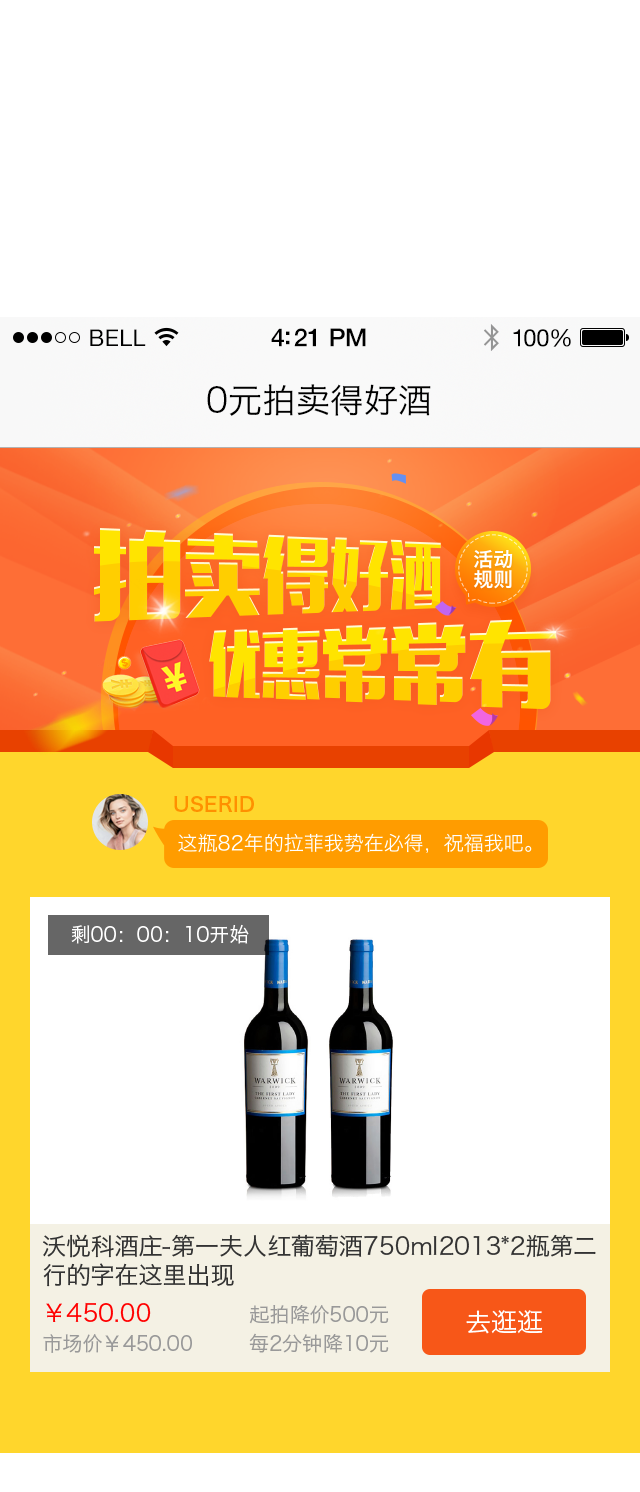
<style>
.page{position:relative;width:640px;height:1492px;background:#ffffff}
.page>*{position:absolute;margin:0}
.t1{font:23px "HelveticaNeue";letter-spacing:0.02em;color:#000000}
.t2{font:25px "HelveticaNeue-Medium";letter-spacing:-0.02em;color:#000000}
.t3{font:24px "HelveticaNeue";letter-spacing:-0.02em;color:#010101}
.t4{font:34px "HiraginoSansGB-W3";color:#000000}
.t5{font:20px "HiraginoSansGB-W6";color:#ff9000}
.t6{font:20px "HiraginoSansGB-W3";color:#ffffff}
.t7{font:24px "HiraginoSansGB-W3";color:#333333}
.t8{font:24px "HiraginoSansGB-W3";color:#ff0000}
.t9{font:20px "HiraginoSansGB-W3";color:#999999}
.t10{font:20px "HiraginoSansGB-W3"}
</style>
<div class="page">
<p class="t1" style="left:90px;top:329px;width:56px;height:17px">BELL</p>
<p class="t2" style="left:271px;top:328px;width:95px;height:19px">4:21 PM</p>
<p class="t3" style="left:513px;top:329px;width:58px;height:18px">100%</p>
<p class="t4" style="left:207px;top:384px;width:224px;height:32px">0元拍卖得好酒</p>
<p class="t5" style="left:174px;top:796px;width:80px;height:16px">USERID</p>
<p class="t6" style="left:71px;top:924px;width:178px;height:20px">剩00：00：10开始</p>
<p class="t7" style="left:43px;top:1234px;width:553px;height:53px">沃悦科酒庄-第一夫人红葡萄酒750ml2013*2瓶第二行的字在这里出现</p>
<p class="t8" style="left:46px;top:1302px;width:105px;height:20px">￥450.00</p>
<p class="t9" style="left:43px;top:1334px;width:149px;height:19px">市场价￥450.00</p>
<p class="t10" style="left:262px;top:1334px;width:126px;height:19px">加价幅度10元</p>
</div>
